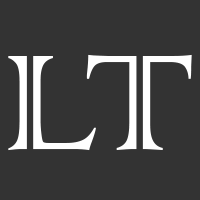
<style>
.page{position:relative;width:200px;height:200px;background:#333333}
.page>*{position:absolute;margin:0}
.t1{font:179.7px "ColonnaMT";color:#ffffff}
</style>
<div class="page">
<p class="t1" style="left:8px;top:54px;width:184px;height:97px">LT</p>
</div>
